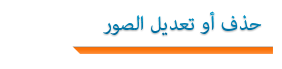
<style>
.page{position:relative;width:282px;height:69px;background:#ffffff}
.page>*{position:absolute;margin:0}
.t1{font:28px "AdobeArabic-Regular";color:#0074a7}
</style>
<div class="page">
<p class="t1" style="left:103px;top:11px;width:159px;height:25px">حذف أو تعديل الصور</p>
</div>
